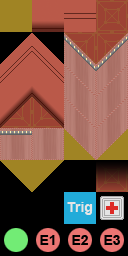
<style>
.page{position:relative;width:128px;height:256px;background:#000000}
.page>*{position:absolute;margin:0}
.t1{font:14px "Arial-BoldMT";color:#e5e5e5}
.t2{font:14px "Arial-BoldMT";color:#000000}
</style>
<div class="page">
<p class="t1" style="left:67px;top:202px;width:26px;height:13px">Trig</p>
<p class="t2" style="left:40px;top:235px;width:15px;height:10px">E1</p>
<p class="t2" style="left:72px;top:235px;width:16px;height:10px">E2</p>
<p class="t2" style="left:104px;top:235px;width:16px;height:10px">E3</p>
</div>
